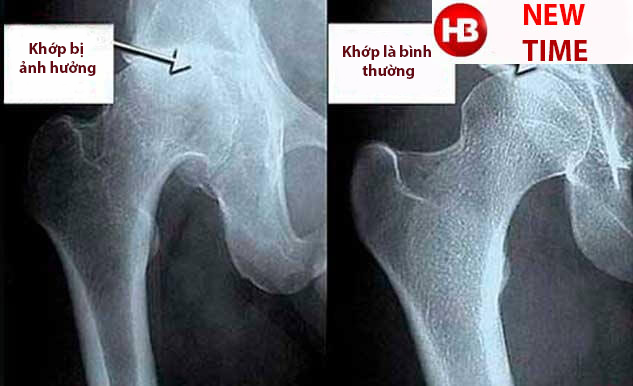
<style>
.page{position:relative;width:633px;height:386px}
.page>*{position:absolute;margin:0}
.t1{font:16px "MyriadPro-Bold";color:#630913}
</style>
<div class="page">
<p class="t1" style="left:19px;top:42px;width:77px;height:34px;text-align:center">Khớp bị <br>ảnh hưởng</p>
<p class="t1" style="left:343px;top:45px;width:88px;height:34px;text-align:center">Khớp là bình <br>thường</p>
</div>
